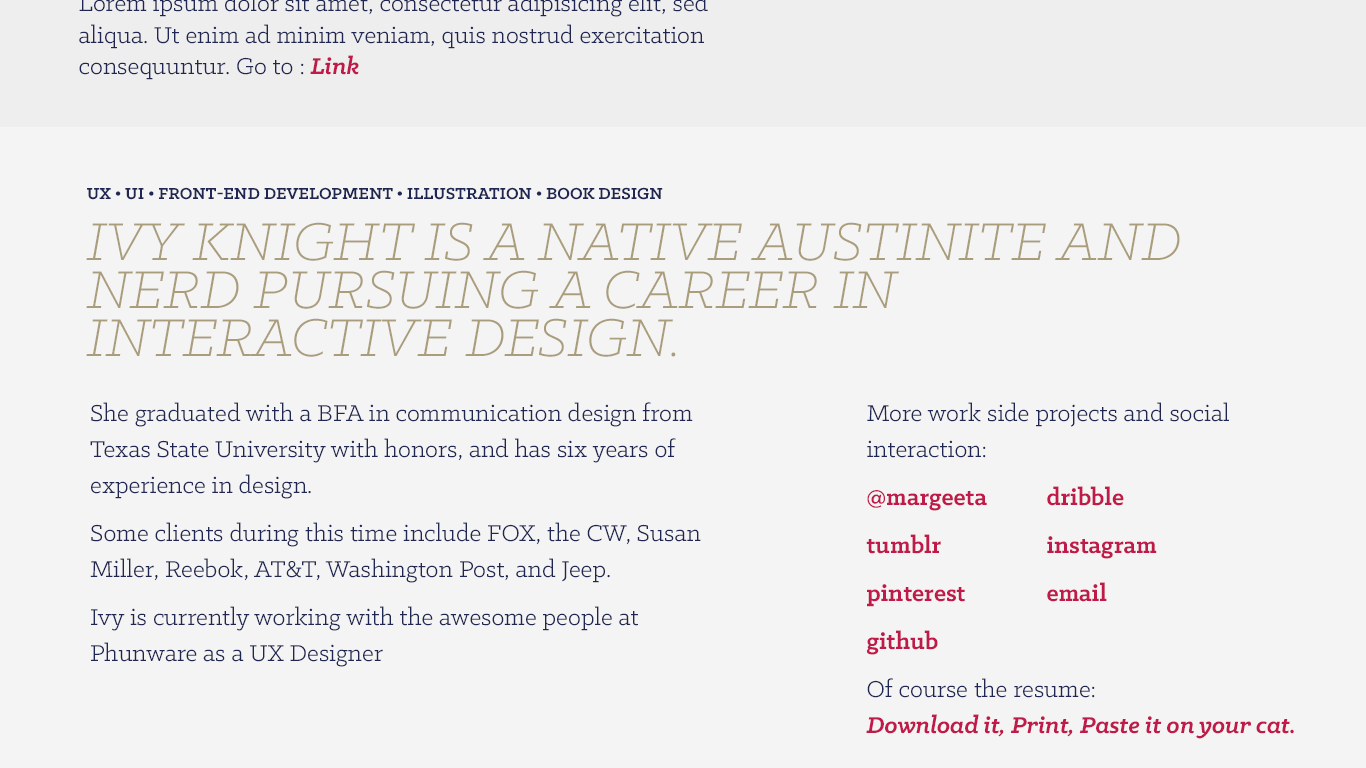
<style>
.page{position:relative;width:1366px;height:768px;background:#f4f4f4}
.page>*{position:absolute;margin:0}
.t1{font:18px "KlinicSlab-Bold";color:#1f2651;text-transform:uppercase}
.t2{font:60px/48px "KlinicSlab-LightItalic";color:#aa9d7b;text-transform:uppercase}
.t3{font:60px/72px "KlinicSlab-LightItalic";color:#aa9d7b;text-transform:uppercase}
.t4{font:26px/36px "KlinicSlab-Book";color:#1f2651}
.t5{font:26px/36px "KlinicSlab-Bold";color:#bf1a49}
.t6{font:26px/36px "KlinicSlab-BoldItalic";color:#bf1a49}
</style>
<div class="page">
<p class="t1" style="left:87px;top:187px;width:576px;height:13px">UX • ui • front-end development • illustration • book design</p>
<p class="t2" style="left:86px;top:222px;width:1094px;height:135px"><span class="t3">I</span>vy Knight is a native austinite and nerd pursuing a career in interactive design.</p>
<p class="t4" style="left:90px;top:402px;width:611px;height:265px">She graduated with a BFA in communication design from Texas State University with honors, and has six years of experience in design. <br>Some clients during this time include FOX, the CW, Susan Miller, Reebok, AT&amp;T, Washington Post, and Jeep. <br>Ivy is currently working with the awesome people at Phunware as a UX Designer</p>
<p class="t5" style="left:866px;top:402px;width:428px;height:337px"><span class="t4">More work side projects and social interaction:<br></span>@margeeta  dribble<br>tumblr   instagram<br>pinterest   email<br>github<br><span class="t4">Of course the resume: <br></span><span class="t6">Download it, Print, Paste it on your cat.</span></p>
</div>
